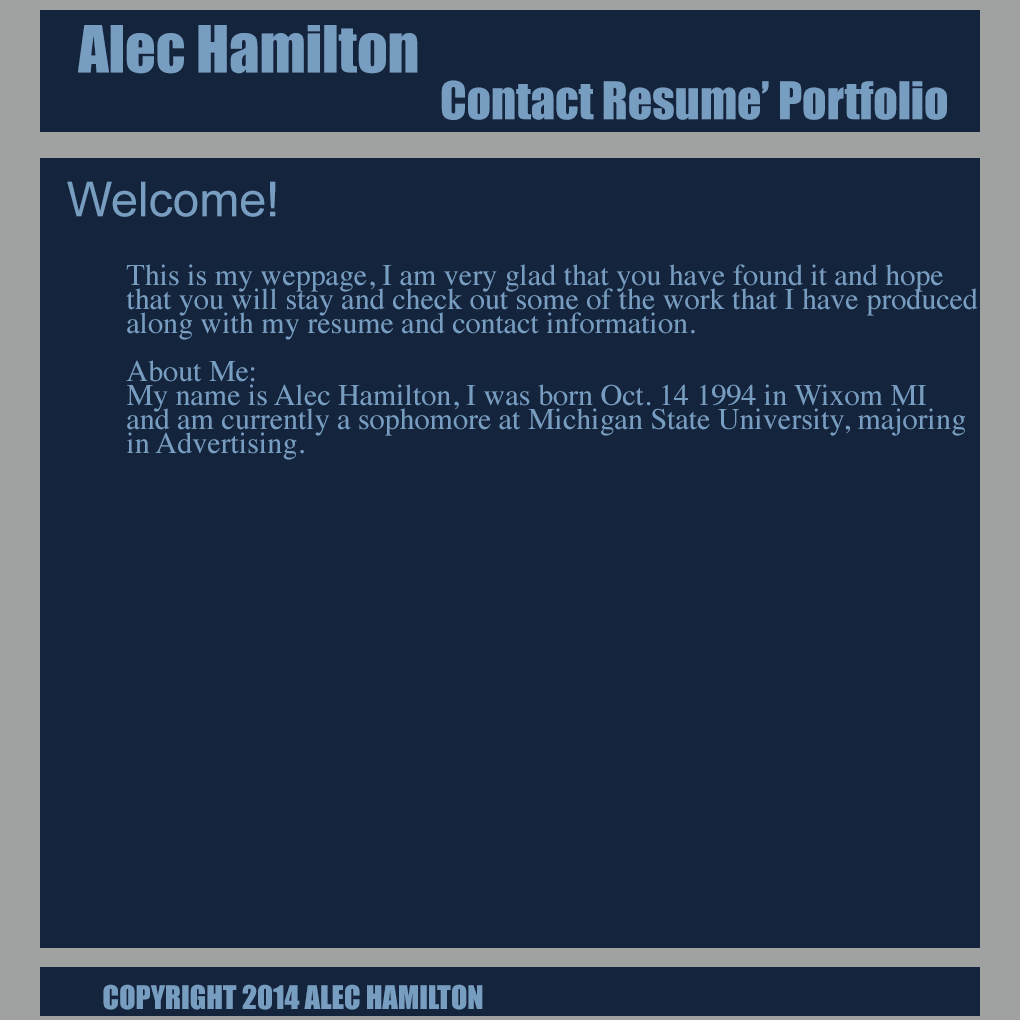
<style>
.page{position:relative;width:1020px;height:1020px;background:#14243d}
.page>*{position:absolute;margin:0}
.t1{font:60px "Impact";color:#779dc1}
.t2{font:48px "Impact";color:#779dc1}
.t3{font:48px "ArialMT";color:#779dc1}
.t4{font:30px/24px "Times-Roman";color:#779dc1}
.t5{font:30px "Impact";color:#779dc1}
</style>
<div class="page">
<p class="t1" style="left:78px;top:25px;width:340px;height:49px">Alec Hamilton</p>
<p class="t2" style="left:441px;top:80px;width:506px;height:40px">Contact Resume’ Portfolio</p>
<p class="t3" style="left:67px;top:181px;width:209px;height:36px">Welcome!</p>
<p class="t4" style="left:126px;top:264px;width:852px;height:196px">This is my weppage, I am very glad that you have found it and hope<br>that you will stay and check out some of the work that I have produced<br>along with my resume and contact information. <br><br>About Me:<br>My name is Alec Hamilton, I was born Oct. 14 1994 in Wixom MI<br>and am currently a sophomore at Michigan State University, majoring<br>in Advertising.</p>
<p class="t5" style="left:103px;top:984px;width:380px;height:26px">COPYRIGHT 2014 ALEC HAMILTON</p>
</div>
